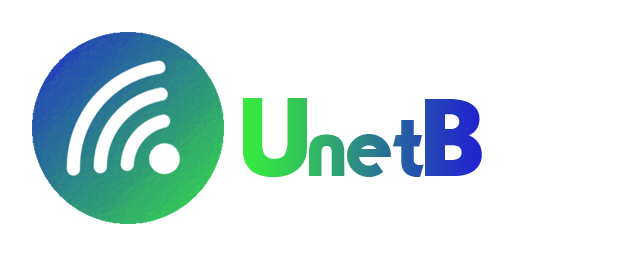
<style>
.page{position:relative;width:640px;height:256px;background:#ffffff}
.page>*{position:absolute;margin:0}
.t1{font:80px "TypoGraphica"}
.t2{font:112px "TypoGraphica"}
</style>
<div class="page">
<p class="t1" style="left:243px;top:98px;width:239px;height:79px"><span class="t2">U</span>net<span class="t2">B</span></p>
</div>
